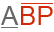
<style>
.page{position:relative;width:54px;height:32px;background:#ffffff}
.page>*{position:absolute;margin:0}
.t1{font:26px "ArialMT";color:#676565}
.t2{font:26px "ArialMT";color:#d12807}
</style>
<div class="page">
<p class="t1" style="left:1px;top:6px;width:18px;height:19px">A</p>
<p class="t2" style="left:21px;top:6px;width:32px;height:19px">BP</p>
</div>
